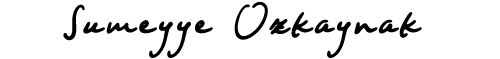
<style>
.page{position:relative;width:500px;height:59px;background:#ffffff}
.page>*{position:absolute;margin:0}
.t1{font:36px "NightWindSentSample";letter-spacing:0.1em;color:#000000;font-weight:bold}
</style>
<div class="page">
<p class="t1" style="left:63px;top:1px;width:359px;height:57px">Sumeyye Ozkaynak</p>
</div>
